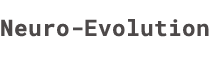
<style>
.page{position:relative;width:210px;height:59px;background:#ffffff}
.page>*{position:absolute;margin:0}
.t1{font:22.7px "RobotoMono-Bold";color:#4d4949}
</style>
<div class="page">
<p class="t1" style="left:1px;top:19px;width:208px;height:18px">Neuro-Evolution</p>
</div>
